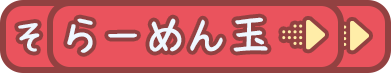
<style>
.page{position:relative;width:391px;height:73px;background:#ea535d}
.page>*{position:absolute;margin:0}
.t1{font:41.7px "HanazomeFont";color:#eff7ff}
</style>
<div class="page">
<p class="t1" style="left:67px;top:17px;width:201px;height:36px">らーめん玉</p>
</div>
